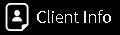
<style>
.page{position:relative;width:120px;height:35px;background:#000000}
.page>*{position:absolute;margin:0}
.t1{font:16px "TaipeiSansTCBeta-Regular";color:#eeeeee}
</style>
<div class="page">
<p class="t1" style="left:37px;top:10px;width:74px;height:13px">Client Info</p>
</div>
